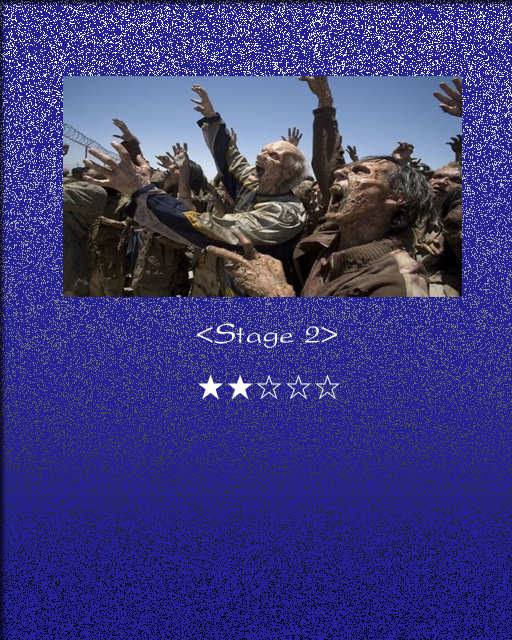
<style>
.page{position:relative;width:512px;height:640px;background:#232194}
.page>*{position:absolute;margin:0}
.t1{font:30px "Yj-NANCHO-Medium";color:#ffffff}
</style>
<div class="page">
<p class="t1" style="left:197px;top:323px;width:143px;height:77px">&lt;Stage 2&gt;<br>★★☆☆☆</p>
</div>
